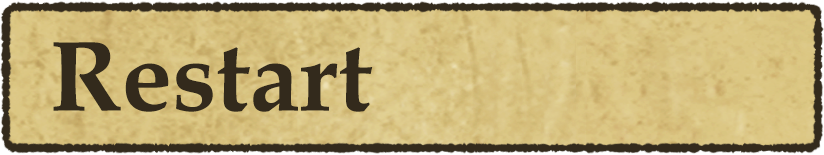
<style>
.page{position:relative;width:824px;height:155px}
.page>*{position:absolute;margin:0}
.t1{font:100px "BookAntiqua-Bold";color:#332a1c}
</style>
<div class="page">
<p class="t1" style="left:53px;top:42px;width:320px;height:70px">Restart</p>
</div>
